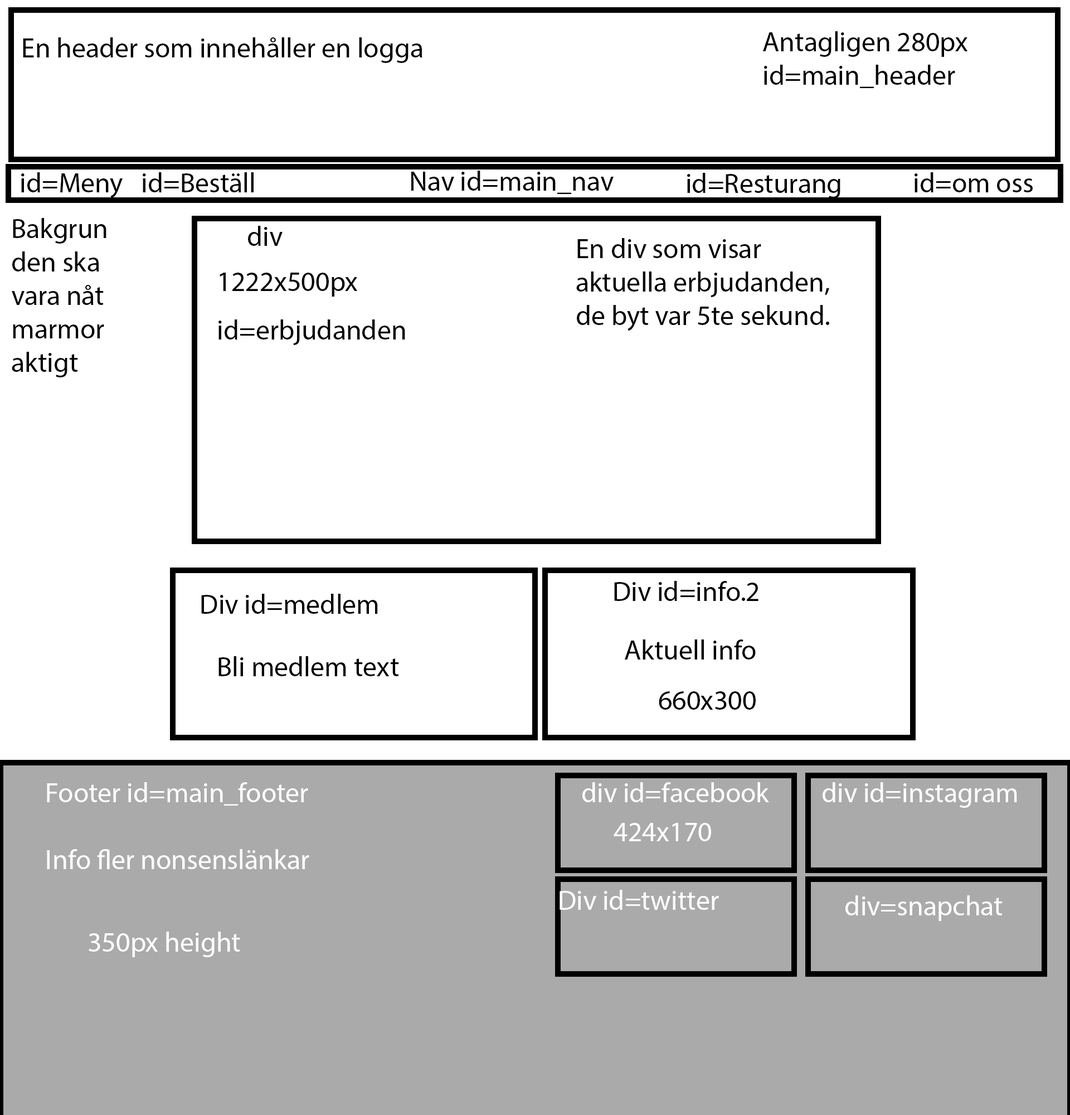
<style>
.page{position:relative;width:1070px;height:1115px;background:#ffffff}
.page>*{position:absolute;margin:0}
.t1{font:27.9px "MyriadPro-Regular";color:#000000}
.t2{font:27.9px "MyriadPro-Regular";color:#fffefe}
.t3{font:27.9px "MyriadPro-Regular";color:#ffffff}
</style>
<div class="page">
<p class="t1" style="left:23px;top:37px;width:399px;height:26px">En header som innehåller en logga</p>
<p class="t1" style="left:763px;top:31px;width:205px;height:57px">Antagligen 280px<br>id=main_header</p>
<p class="t1" style="left:21px;top:172px;width:102px;height:26px">id=Meny</p>
<p class="t1" style="left:143px;top:172px;width:111px;height:20px">id=Beställ</p>
<p class="t1" style="left:411px;top:171px;width:203px;height:23px">Nav id=main_nav</p>
<p class="t1" style="left:687px;top:173px;width:153px;height:25px">id=Resturanger</p>
<p class="t1" style="left:914px;top:172px;width:119px;height:20px">id=om oss</p>
<p class="t1" style="left:12px;top:218px;width:94px;height:159px">Bakgrunden ska vara nåt marmor aktigt</p>
<p class="t1" style="left:248px;top:226px;width:35px;height:20px">div</p>
<p class="t1" style="left:576px;top:238px;width:253px;height:93px">En div som visar aktuella erbjudanden, de byt var 5te sekund.</p>
<p class="t1" style="left:220px;top:272px;width:138px;height:24px">1222x500px</p>
<p class="t1" style="left:218px;top:319px;width:187px;height:26px">id=erbjudanden</p>
<p class="t1" style="left:614px;top:581px;width:144px;height:20px">Div id=info.2</p>
<p class="t1" style="left:201px;top:593px;width:177px;height:21px">Div id=medlem</p>
<p class="t1" style="left:625px;top:639px;width:131px;height:20px">Aktuell info</p>
<p class="t1" style="left:218px;top:656px;width:181px;height:20px">Bli medlem text</p>
<p class="t1" style="left:659px;top:691px;width:97px;height:18px">660x300</p>
<p class="t2" style="left:47px;top:782px;width:262px;height:87px">Footer id=main_footer<br><br>Info fler nonsenslänkar</p>
<p class="t2" style="left:582px;top:782px;width:187px;height:20px">div id=facebook</p>
<p class="t2" style="left:823px;top:782px;width:194px;height:25px">div id=instagram</p>
<p class="t2" style="left:614px;top:823px;width:97px;height:18px">424x170</p>
<p class="t2" style="left:559px;top:889px;width:160px;height:20px">Div id=twitter</p>
<p class="t2" style="left:845px;top:895px;width:157px;height:26px">div=snapchat</p>
<p class="t3" style="left:89px;top:931px;width:151px;height:26px">350px height</p>
</div>
